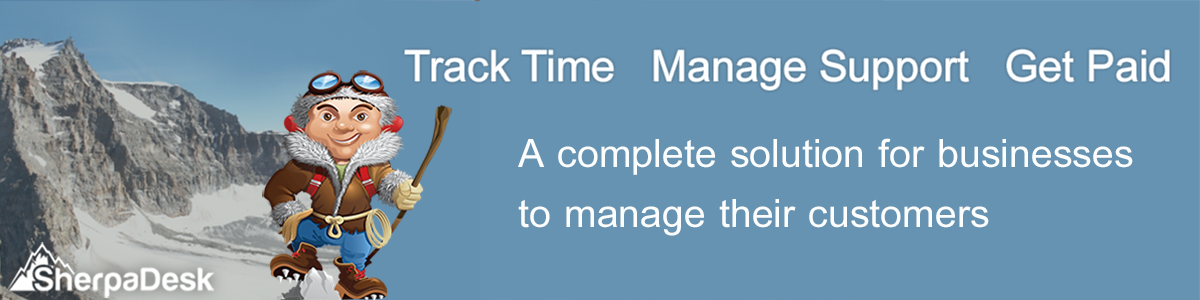
<style>
.page{position:relative;width:1200px;height:300px;background:#6693b2}
.page>*{position:absolute;margin:0}
.t1{font:43px "ArialMT";color:#ffffff}
.t2{font:60px/60px "BrowalliaNew";color:#fcfdfd}
</style>
<div class="page">
<p class="t1" style="left:405px;top:49px;width:764px;height:41px">Track Time   Manage Support   Get Paid</p>
<p class="t2" style="left:518px;top:138px;width:615px;height:98px">A complete solution for businesses <br>to manage their customers</p>
</div>
